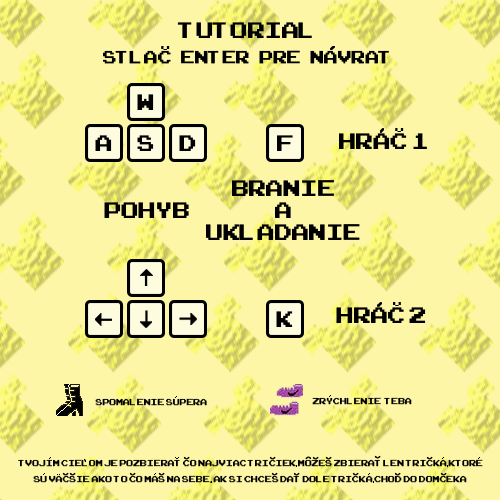
<style>
.page{position:relative;width:500px;height:500px;background:#fcf6a6}
.page>*{position:absolute;margin:0}
.t1{font:25px/25px "ArcadeClassic";color:#000000}
.t2{font:31.3px/128.1px "ArcadeClassic";color:#000000}
.t3{font:9.4px "ArcadeClassic";color:#000000;scale:1.69 1}
.t4{font:31.3px "ArcadeClassic";color:#000000}
.t5{font:31.3px/21.9px "ArcadeClassic";color:#000000}
.t6{font:12.5px "ArcadeClassic";color:#000000}
.t7{font:12.5px/16.7px "ArcadeClassic";color:#000000}
.t8{font:12.5px/16.7px "MyriadPro-Regular";color:#000000}
.t9{font:5.4px "ArcadeClassic";color:#000000;scale:1.97 1}
</style>
<div class="page">
<p class="t1" style="left:103px;top:22px;width:286px;height:42px;text-align:center"><span class="t2">Tutorial<br></span>Stlac   Enter   pre   navrat</p>
<p class="t3" style="left:161px;top:46px;width:9px;height:4px">v</p>
<p class="t4" style="left:137px;top:94px;width:17px;height:16px">W</p>
<p class="t4" style="left:95px;top:135px;width:17px;height:16px">A</p>
<p class="t4" style="left:137px;top:135px;width:17px;height:16px">S</p>
<p class="t4" style="left:179px;top:135px;width:17px;height:16px">D</p>
<p class="t4" style="left:277px;top:135px;width:16px;height:16px">F</p>
<p class="t4" style="left:339px;top:133px;width:88px;height:16px">HrAc 1</p>
<p class="t3" style="left:395px;top:128px;width:9px;height:4px">v</p>
<p class="t5" style="left:206px;top:180px;width:154px;height:60px;text-align:center">Branie<br>a<br>ukladanie</p>
<p class="t4" style="left:104px;top:202px;width:85px;height:16px">Pohyb</p>
<p class="t3" style="left:393px;top:302px;width:8px;height:4px">v</p>
<p class="t4" style="left:276px;top:311px;width:17px;height:16px">K</p>
<p class="t4" style="left:336px;top:307px;width:90px;height:16px">HrAc 2</p>
<p class="t6" style="left:95px;top:398px;width:112px;height:8px">spomalenie supera</p>
<p class="t7" style="left:18px;top:459px;width:465px;height:24px;text-align:center">Tvojim cielom je pozbierat co najviac triciek mozes zbierat len tricka ktore <br>su vacsie ako to co mas na sebe<span class="t8">.</span> ak si chces dat dole tricka chod do domceka</p>
<p class="t9" style="left:183px;top:456px;width:7px;height:4px">v</p>
<p class="t9" style="left:269px;top:456px;width:7px;height:4px">v</p>
<p class="t9" style="left:305px;top:456px;width:7px;height:4px;rotate:-180deg">v</p>
<p class="t9" style="left:312px;top:456px;width:7px;height:4px">v</p>
<p class="t9" style="left:325px;top:456px;width:7px;height:4px">v</p>
<p class="t9" style="left:374px;top:455px;width:7px;height:4px">v</p>
<p class="t9" style="left:426px;top:456px;width:7px;height:4px">v</p>
<p class="t9" style="left:62px;top:472px;width:7px;height:4px">v</p>
<p class="t9" style="left:69px;top:472px;width:7px;height:4px">v</p>
<p class="t9" style="left:129px;top:472px;width:7px;height:4px">v</p>
<p class="t9" style="left:158px;top:472px;width:7px;height:4px">v</p>
<p class="t9" style="left:271px;top:472px;width:7px;height:4px">v</p>
<p class="t9" style="left:293px;top:472px;width:7px;height:4px">v</p>
<p class="t9" style="left:352px;top:472px;width:7px;height:4px">v</p>
<p class="t9" style="left:394px;top:472px;width:7px;height:4px">v</p>
<p class="t9" style="left:440px;top:472px;width:7px;height:4px">v</p>
</div>
